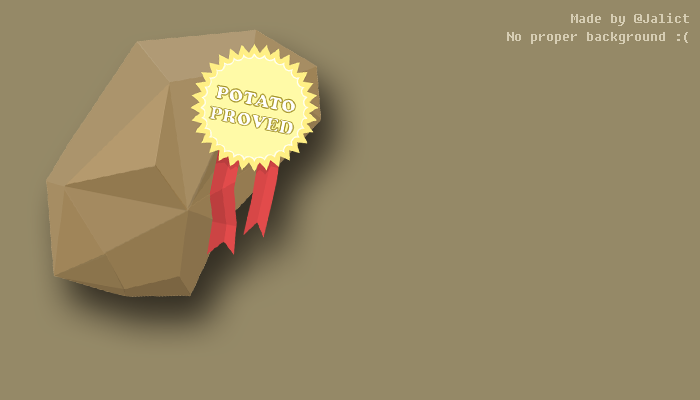
<style>
.page{position:relative;width:700px;height:400px;background:#958967}
.page>*{position:absolute;margin:0}
.t1{font:21px "Fixedsys";color:#d6cdb3}
</style>
<div class="page">
<p class="t1" style="left:571px;top:13px;width:118px;height:13px">Made by @Jalict</p>
<p class="t1" style="left:507px;top:32px;width:181px;height:12px">No proper background :(</p>
</div>
